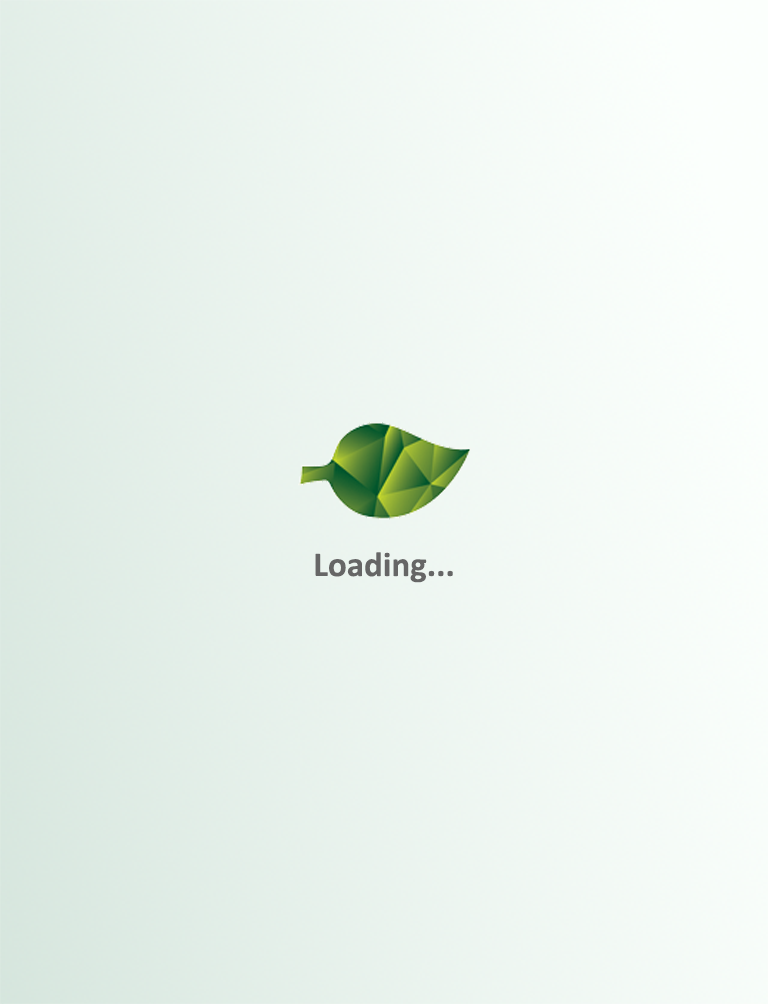
<style>
.page{position:relative;width:768px;height:1004px}
.page>*{position:absolute;margin:0}
.t1{font:35px "Calibri-Bold";color:#666666}
</style>
<div class="page">
<p class="t1" style="left:315px;top:552px;width:138px;height:31px">Loading...</p>
</div>
